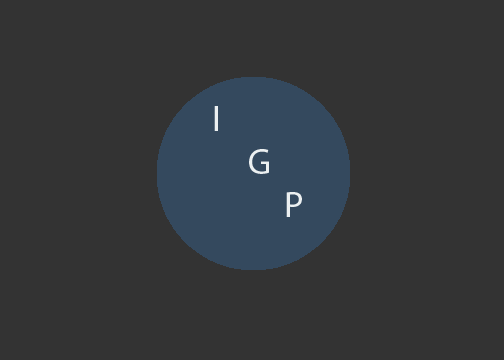
<style>
.page{position:relative;width:504px;height:360px;background:#333333}
.page>*{position:absolute;margin:0}
.t1{font:36px "MyriadPro-Regular";color:#ecf0f1}
</style>
<div class="page">
<p class="t1" style="left:214px;top:106px;width:88px;height:111px">I<br> G<br>  P</p>
</div>
